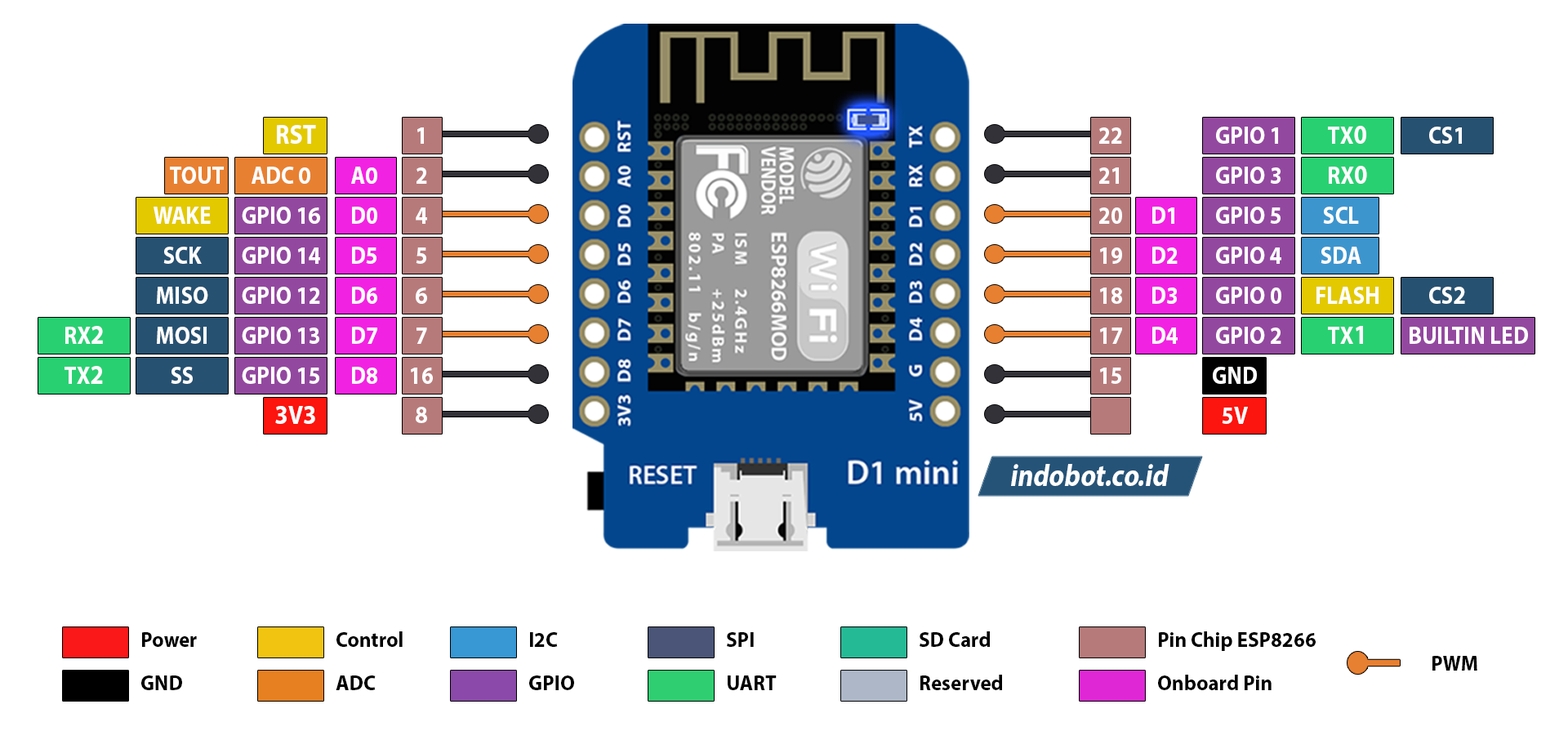
<style>
.page{position:relative;width:1568px;height:740px;background:#ffffff}
.page>*{position:absolute;margin:0}
.t1{font:27.1px "MyriadPro-Bold";color:#ffffff;scale:0.89 1}
.t2{font:24.8px "MyriadPro-Bold";color:#ffffff;scale:0.89 1}
.t3{font:27.2px "MyriadPro-Bold";color:#ffffff;scale:0.89 1}
.t4{font:26.1px "MyriadPro-Bold";color:#ffffff;scale:0.89 1}
.t5{font:21px "MyriadPro-Bold";color:#000000}
</style>
<div class="page">
<p class="t1" style="left:277px;top:125px;width:39px;height:19px">RST</p>
<p class="t2" style="left:1328px;top:126px;width:38px;height:18px">TX<span class="t3">0</span></p>
<p class="t2" style="left:417px;top:127px;width:7px;height:17px">1</p>
<p class="t2" style="left:1099px;top:127px;width:23px;height:17px">22</p>
<p class="t2" style="left:1216px;top:127px;width:62px;height:17px">GPIO 1</p>
<p class="t2" style="left:1429px;top:127px;width:33px;height:17px">CS1</p>
<p class="t2" style="left:170px;top:167px;width:54px;height:17px">TOUT</p>
<p class="t2" style="left:252px;top:167px;width:58px;height:17px">ADC 0</p>
<p class="t2" style="left:351px;top:167px;width:26px;height:17px">A0</p>
<p class="t2" style="left:416px;top:167px;width:11px;height:17px">2</p>
<p class="t2" style="left:1099px;top:167px;width:20px;height:17px">21</p>
<p class="t2" style="left:1216px;top:167px;width:65px;height:17px">GPIO 3</p>
<p class="t2" style="left:1329px;top:166px;width:38px;height:18px">RX<span class="t3">0</span></p>
<p class="t2" style="left:154px;top:207px;width:57px;height:17px">WAKE</p>
<p class="t2" style="left:242px;top:207px;width:78px;height:17px">GPIO 16</p>
<p class="t2" style="left:352px;top:207px;width:25px;height:17px">D0</p>
<p class="t2" style="left:416px;top:207px;width:11px;height:17px">4</p>
<p class="t2" style="left:1099px;top:207px;width:23px;height:17px">20</p>
<p class="t2" style="left:1152px;top:207px;width:22px;height:17px">D1</p>
<p class="t2" style="left:1216px;top:207px;width:65px;height:17px">GPIO 5</p>
<p class="t2" style="left:1323px;top:207px;width:36px;height:17px">SCL</p>
<p class="t2" style="left:163px;top:247px;width:39px;height:17px">SCK</p>
<p class="t2" style="left:242px;top:247px;width:78px;height:17px">GPIO 14</p>
<p class="t2" style="left:352px;top:247px;width:24px;height:17px">D5</p>
<p class="t2" style="left:416px;top:247px;width:10px;height:17px">5</p>
<p class="t2" style="left:1100px;top:247px;width:22px;height:17px">19</p>
<p class="t2" style="left:1152px;top:247px;width:26px;height:17px">D2</p>
<p class="t2" style="left:1216px;top:247px;width:65px;height:17px">GPIO 4</p>
<p class="t2" style="left:1321px;top:247px;width:40px;height:17px">SDA</p>
<p class="t2" style="left:157px;top:287px;width:51px;height:17px">MISO</p>
<p class="t2" style="left:242px;top:287px;width:78px;height:17px">GPIO 12</p>
<p class="t2" style="left:352px;top:287px;width:25px;height:17px">D6</p>
<p class="t2" style="left:416px;top:287px;width:11px;height:17px">6</p>
<p class="t2" style="left:1100px;top:287px;width:22px;height:17px">18</p>
<p class="t2" style="left:1152px;top:287px;width:25px;height:17px">D3</p>
<p class="t2" style="left:1216px;top:287px;width:65px;height:17px">GPIO 0</p>
<p class="t2" style="left:1316px;top:287px;width:63px;height:17px">FLASH</p>
<p class="t2" style="left:1429px;top:287px;width:36px;height:17px">CS<span class="t4">2</span></p>
<p class="t2" style="left:65px;top:326px;width:38px;height:18px">RX<span class="t3">2</span></p>
<p class="t2" style="left:157px;top:327px;width:50px;height:17px">MOSI</p>
<p class="t2" style="left:242px;top:327px;width:77px;height:17px">GPIO 13</p>
<p class="t2" style="left:352px;top:327px;width:25px;height:17px">D7</p>
<p class="t2" style="left:416px;top:327px;width:11px;height:17px">7</p>
<p class="t2" style="left:1100px;top:327px;width:22px;height:17px">17</p>
<p class="t2" style="left:1152px;top:327px;width:26px;height:17px">D4</p>
<p class="t2" style="left:1216px;top:327px;width:65px;height:17px">GPIO 2</p>
<p class="t2" style="left:1328px;top:326px;width:35px;height:18px">TX<span class="t3">1</span></p>
<p class="t2" style="left:1410px;top:327px;width:118px;height:17px">BUILTIN LED</p>
<p class="t2" style="left:65px;top:366px;width:38px;height:18px">TX<span class="t3">2</span></p>
<p class="t2" style="left:171px;top:367px;width:22px;height:17px">SS</p>
<p class="t2" style="left:242px;top:367px;width:77px;height:17px">GPIO 15</p>
<p class="t2" style="left:352px;top:367px;width:25px;height:17px">D8</p>
<p class="t2" style="left:411px;top:368px;width:22px;height:16px">16</p>
<p class="t2" style="left:1100px;top:368px;width:21px;height:16px">15</p>
<p class="t2" style="left:1213px;top:367px;width:44px;height:17px">GND</p>
<p class="t1" style="left:275px;top:406px;width:40px;height:18px">3<span class="t4">V</span>3</p>
<p class="t2" style="left:416px;top:407px;width:11px;height:16px">8</p>
<p class="t2" style="left:1222px;top:407px;width:26px;height:17px">5V</p>
<p class="t5" style="left:142px;top:632px;width:55px;height:15px">Power</p>
<p class="t5" style="left:336px;top:631px;width:67px;height:16px">Control</p>
<p class="t5" style="left:530px;top:632px;width:28px;height:15px">I2C</p>
<p class="t5" style="left:727px;top:632px;width:27px;height:15px">SPI</p>
<p class="t5" style="left:920px;top:631px;width:70px;height:16px">SD Card</p>
<p class="t5" style="left:1159px;top:631px;width:157px;height:20px">Pin Chip ESP8266</p>
<p class="t5" style="left:1432px;top:656px;width:45px;height:14px">PWM</p>
<p class="t5" style="left:141px;top:675px;width:41px;height:15px">GND</p>
<p class="t5" style="left:336px;top:675px;width:40px;height:15px">ADC</p>
<p class="t5" style="left:529px;top:675px;width:45px;height:15px">GPIO</p>
<p class="t5" style="left:728px;top:675px;width:49px;height:15px">UART</p>
<p class="t5" style="left:920px;top:675px;width:82px;height:15px">Reserved</p>
<p class="t5" style="left:1158px;top:675px;width:114px;height:15px">Onboard Pin</p>
</div>
